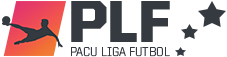
<style>
.page{position:relative;width:227px;height:57px;background:#ffffff}
.page>*{position:absolute;margin:0}
.t1{font:59.5px "UnitedSansReg-Black";color:#343a40}
.t2{font:12.9px "UnitedSansReg-Light";color:#343a40}
</style>
<div class="page">
<p class="t1" style="left:71px;top:1px;width:99px;height:41px">PLF</p>
<p class="t2" style="left:71px;top:47px;width:99px;height:10px">PACU LIGA FUTBOL</p>
</div>
